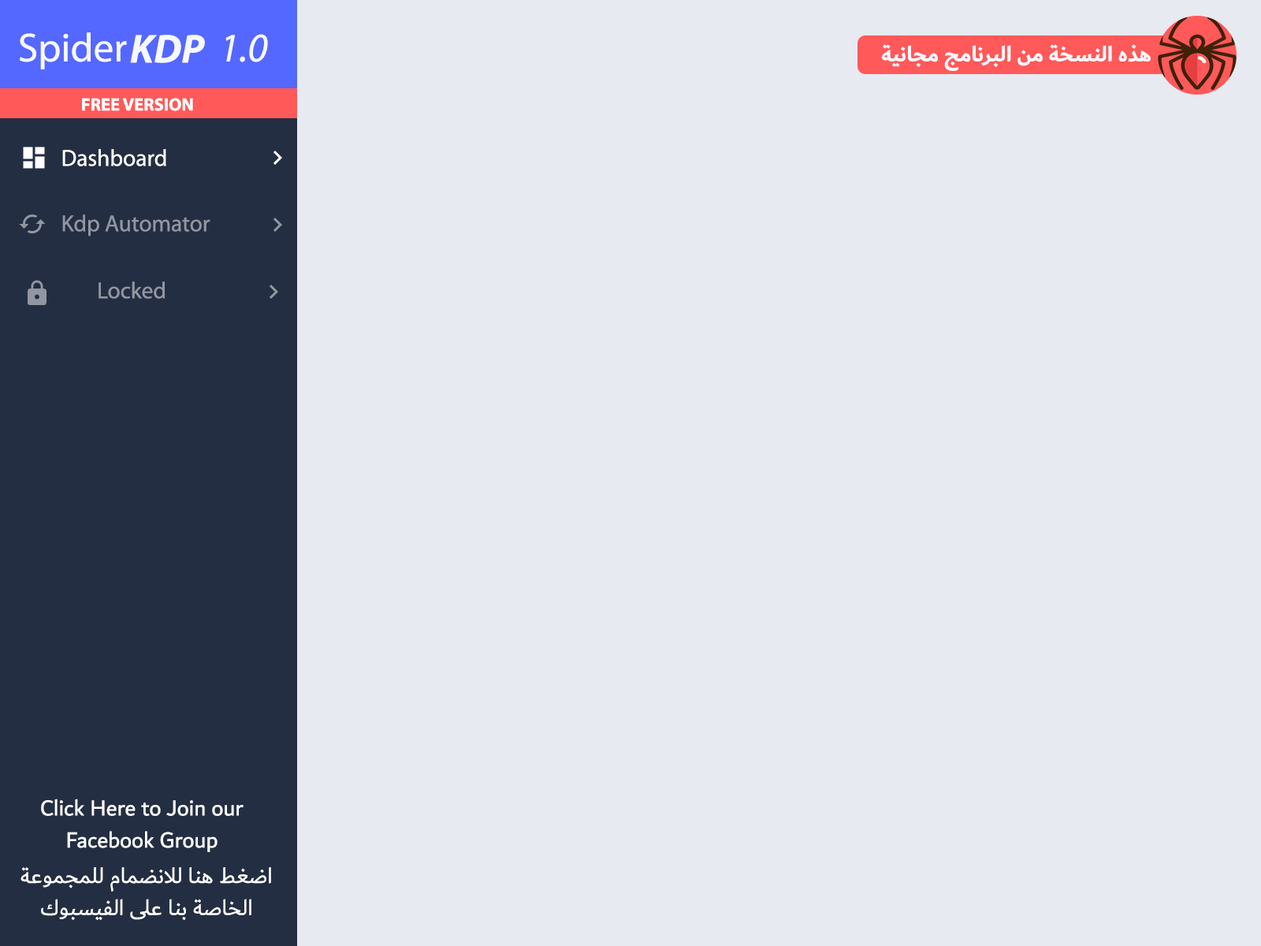
<style>
.page{position:relative;width:1261px;height:946px;background:#e7eaf1}
.page>*{position:absolute;margin:0}
.t1{font:40.6px "MyriadPro-Regular";color:#f7f8fe}
.t2{font:40.6px "MyriadPro-BoldIt";color:#f7f8fe}
.t3{font:40.6px "MyriadPro-It";color:#f7f8fe}
.t4{font:22.8px "Dubai-Bold";color:#f7f8fe}
.t5{font:17.8px "MyriadPro-Bold";color:#ffffff}
.t6{font:23.2px "MyriadPro-Regular";color:#ffffff}
.t7{font:23.2px "MyriadPro-Regular";color:#9296a1}
.t8{font:23.2px/32px "Dubai-Regular";color:#ffffff}
</style>
<div class="page">
<p class="t1" style="left:19px;top:32px;width:108px;height:37px">Spider</p>
<p class="t2" style="left:130px;top:35px;width:75px;height:28px">KDP</p>
<p class="t3" style="left:225px;top:34px;width:43px;height:28px">1.0</p>
<p class="t4" style="left:881px;top:44px;width:270px;height:27px">هذه النسخة من البرنامج مجانية</p>
<p class="t5" style="left:82px;top:98px;width:111px;height:13px">FREE VERSION</p>
<p class="t6" style="left:62px;top:149px;width:104px;height:17px">Dashboard</p>
<p class="t7" style="left:62px;top:214px;width:148px;height:22px">Kdp Automator</p>
<p class="t7" style="left:99px;top:281px;width:66px;height:18px">Locked</p>
<p class="t8" style="left:41px;top:798px;width:203px;height:54px;text-align:center">Click Here to Join our<br>Facebook Group</p>
<p class="t8" style="left:20px;top:867px;width:251px;height:53px;text-align:center">اضغط هنا للانضمام للمجموعة<br>الخاصة بنا على الفيسبوك</p>
</div>
